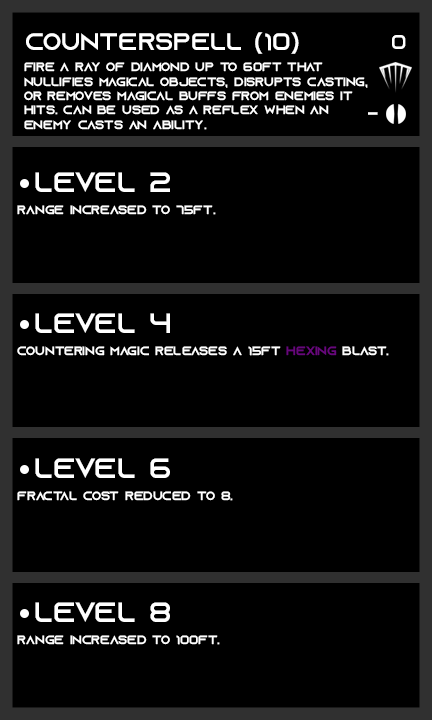
<style>
.page{position:relative;width:432px;height:720px;background:#000000}
.page>*{position:absolute;margin:0}
.t1{font:24px "AzonixRegular";color:#ffffff}
.t2{font:20px "AzonixRegular";color:#ffffff}
.t3{font:12px "AzonixRegular";color:#ffffff}
.t4{font:28px "AzonixRegular";color:#ffffff}
.t5{font:12px "AzonixRegular";color:#67087b}
</style>
<div class="page">
<p class="t1" style="left:26px;top:32px;width:273px;height:22px">counterspell (10)</p>
<p class="t2" style="left:392px;top:35px;width:14px;height:14px">0</p>
<p class="t3" style="left:24px;top:62px;width:344px;height:68px">fire a ray of diamond up to 60ft that <br>nullifies magical objects, disrupts casting, <br>or removes magical buffs from enemies it <br>hits. can be used as a reflex when an <br>enemy casts an ability.</p>
<p class="t2" style="left:368px;top:112px;width:10px;height:3px">-</p>
<p class="t4" style="left:35px;top:172px;width:135px;height:20px">level 2</p>
<p class="t3" style="left:17px;top:205px;width:199px;height:10px">range increased to 75ft.</p>
<p class="t4" style="left:35px;top:313px;width:135px;height:20px">level 4</p>
<p class="t3" style="left:17px;top:346px;width:372px;height:10px">countering magic releases a 15ft <span class="t5">hexing</span> blast.</p>
<p class="t4" style="left:35px;top:458px;width:135px;height:20px">level 6</p>
<p class="t3" style="left:17px;top:491px;width:216px;height:10px">fractal cost reduced to 8.</p>
<p class="t4" style="left:35px;top:602px;width:135px;height:20px">level 8</p>
<p class="t3" style="left:17px;top:635px;width:203px;height:10px">range increased to 100ft.</p>
</div>
